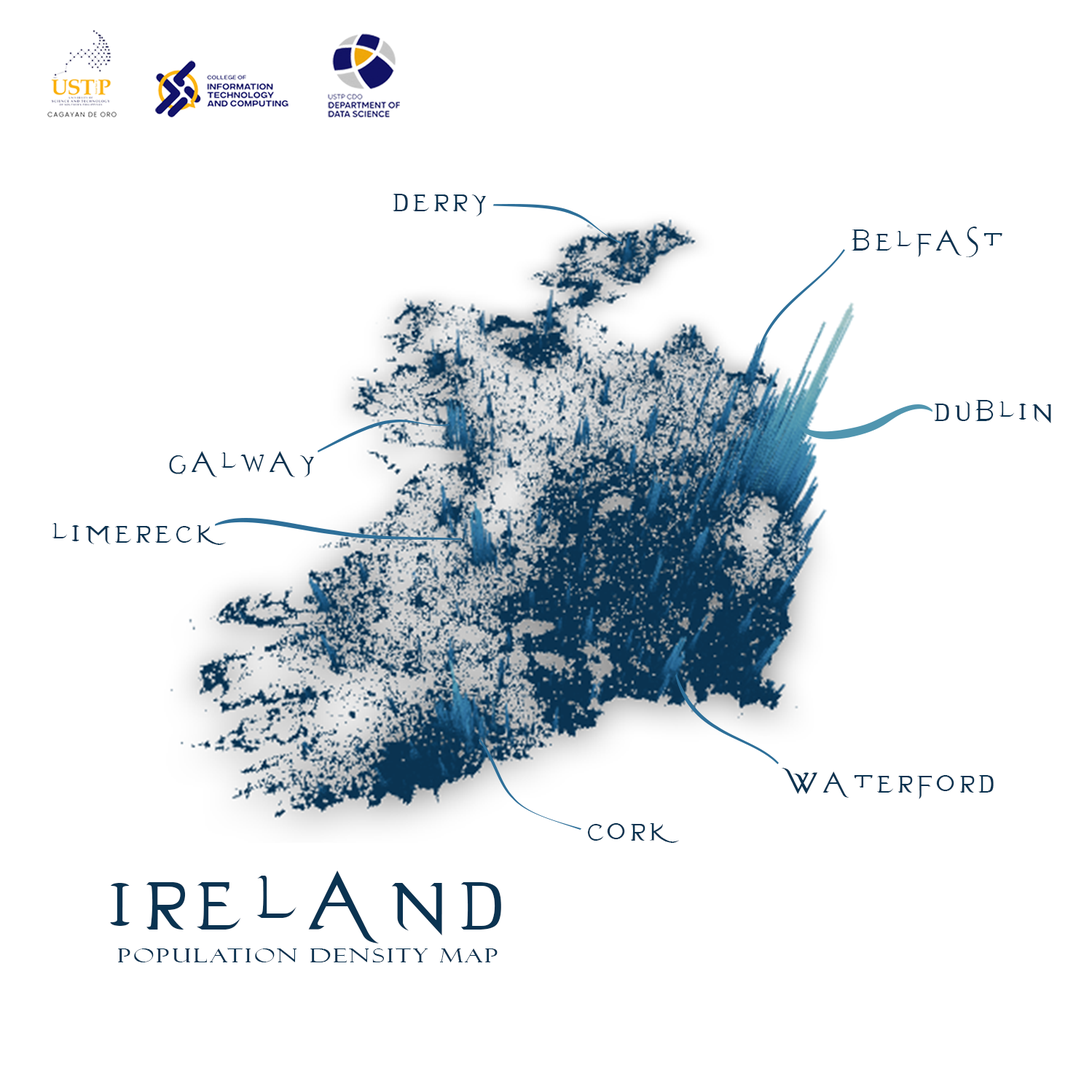
<style>
.page{position:relative;width:1092px;height:1092px;background:#ffffff}
.page>*{position:absolute;margin:0}
.t1{font:43.7px "EvanescentP";letter-spacing:0.1em;color:#0a3351}
.t2{font:120.2px "EvanescentP";letter-spacing:0.1em;color:#0a3351}
.t3{font:19.1px "FelixTitlingMT";letter-spacing:0.1em;color:#0a3351;scale:1.32 1}
</style>
<div class="page">
<p class="t1" style="left:393px;top:194px;width:93px;height:22px">derry</p>
<p class="t1" style="left:852px;top:227px;width:150px;height:30px">belfast</p>
<p class="t1" style="left:934px;top:400px;width:117px;height:23px">dublin</p>
<p class="t1" style="left:169px;top:451px;width:145px;height:26px">galway</p>
<p class="t1" style="left:52px;top:523px;width:174px;height:22px">limereck</p>
<p class="t1" style="left:782px;top:768px;width:212px;height:31px">Waterford</p>
<p class="t1" style="left:587px;top:823px;width:92px;height:20px">cork</p>
<p class="t2" style="left:110px;top:871px;width:391px;height:72px">ireland</p>
<p class="t3" style="left:118px;top:948px;width:380px;height:14px">population density map</p>
</div>
